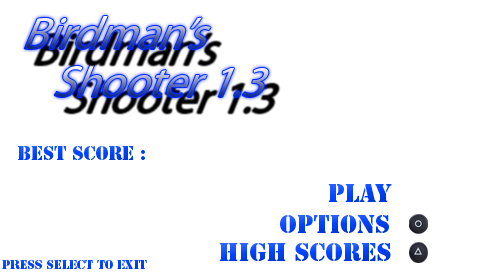
<style>
.page{position:relative;width:480px;height:272px;background:#ffffff}
.page>*{position:absolute;margin:0}
.t1{font:18px "StencilStd"}
.t2{font:24px "StencilStd"}
.t3{font:12px "StencilStd";color:#0042fe}
</style>
<div class="page">
<p class="t1" style="left:18px;top:146px;width:127px;height:14px">Best Score :</p>
<p class="t2" style="left:328px;top:184px;width:64px;height:18px">Play</p>
<p class="t2" style="left:280px;top:215px;width:109px;height:18px">options</p>
<p class="t2" style="left:219px;top:243px;width:172px;height:18px">High Scores</p>
<p class="t3" style="left:2px;top:260px;width:145px;height:9px">Press SELECT To Exit</p>
</div>
